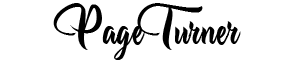
<style>
.page{position:relative;width:304px;height:63px;background:#ffffff}
.page>*{position:absolute;margin:0}
.t1{font:34.7px "AllessaPersonalUse";color:#000000}
</style>
<div class="page">
<p class="t1" style="left:53px;top:3px;width:188px;height:57px">PageTurner</p>
</div>
